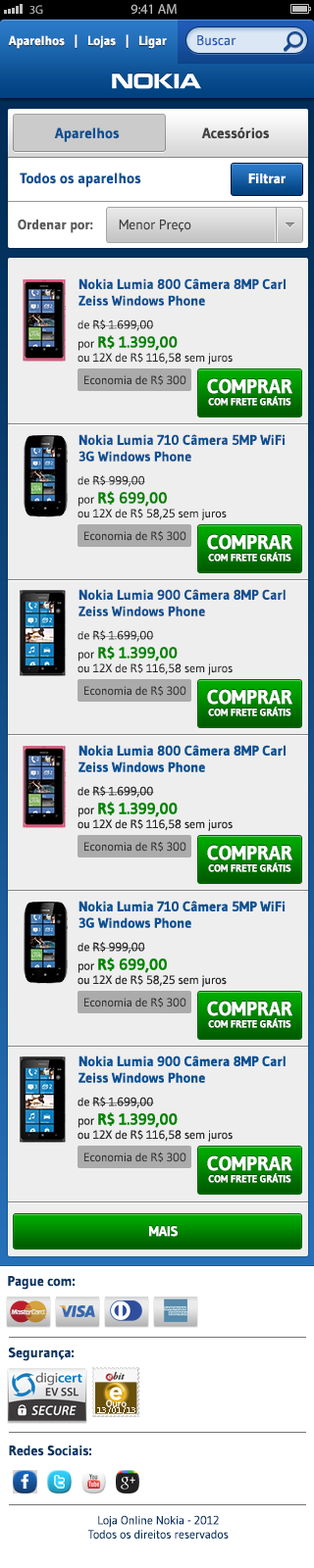
<style>
.page{position:relative;width:314px;height:1568px;background:#eeeeee}
.page>*{position:absolute;margin:0}
.t1{font:12px "MyriadPro-Regular";color:#bfbfbf}
.t2{font:13.8px "MyriadPro-Regular";color:#bfbfbf}
.t3{font:12.7px "Gudea-Bold";color:#ffffff}
.t4{font:13.7px "Gudea";color:#1e58b1}
.t5{font:14.7px "Gudea-Bold";color:#0b4f91}
.t6{font:14.7px "Gudea-Bold";color:#404040}
.t7{font:13.7px "Gudea-Bold";color:#ffffff}
.t8{font:13.7px "Gudea-Bold";color:#5b5b5b}
.t9{font:13.7px "Gudea";color:#404040}
.t10{font:13.7px "Gudea-Bold";color:#0c5093}
.t11{font:11.8px "Gudea";color:#262626}
.t12{font:15.7px "Gudea-Bold";color:#008300}
.t13{font:11.8px "Gudea";color:#373737}
.t14{font:9.9px "Gudea-Bold";color:#ffffff;text-transform:uppercase}
.t15{font:19.8px "Gudea-Bold";color:#ffffff;text-transform:uppercase}
.t16{font:13.7px "Gudea-Bold";color:#ffffff;text-transform:uppercase}
.t17{font:13.7px "Gudea-Bold";color:#063665}
.t18{font:11.8px "Gudea";color:#063665}
</style>
<div class="page">
<p class="t1" style="left:29px;top:5px;width:14px;height:9px">3G</p>
<p class="t2" style="left:130px;top:4px;width:46px;height:10px">9:41 AM</p>
<p class="t3" style="left:8px;top:34px;width:159px;height:15px">Aparelhos   |   Lojas   |   Ligar</p>
<p class="t4" style="left:197px;top:35px;width:39px;height:11px">Buscar</p>
<p class="t5" style="left:54px;top:127px;width:66px;height:15px">Aparelhos</p>
<p class="t6" style="left:201px;top:126px;width:68px;height:13px">Acessórios</p>
<p class="t5" style="left:20px;top:172px;width:121px;height:15px">Todos os aparelhos</p>
<p class="t7" style="left:248px;top:173px;width:37px;height:11px">Filtrar</p>
<p class="t8" style="left:18px;top:220px;width:75px;height:13px">Ordenar por:</p>
<p class="t9" style="left:119px;top:220px;width:72px;height:12px">Menor Preço</p>
<p class="t10" style="left:78px;top:278px;width:207px;height:28px">Nokia Lumia 800 Câmera 8MP Carl Zeiss Windows Phone</p>
<p class="t11" style="left:77px;top:319px;width:155px;height:46px">de R$ 1.699,00<br>por <span class="t12">R$ 1.399,00</span><br>ou 12X de R$ 116,58 sem juros</p>
<p class="t13" style="left:84px;top:375px;width:102px;height:10px">Economia de R$ 300</p>
<p class="t14" style="left:207px;top:378px;width:85px;height:28px;text-align:center"><span class="t15">Comprar<br></span>com frete Grátis</p>
<p class="t10" style="left:78px;top:434px;width:206px;height:28px">Nokia Lumia 710 Câmera 5MP WiFi 3G Windows Phone</p>
<p class="t11" style="left:77px;top:475px;width:149px;height:45px">de R$ 999,00<br>por <span class="t12">R$ 699,00</span><br>ou 12X de R$ 58,25 sem juros</p>
<p class="t13" style="left:84px;top:531px;width:102px;height:10px">Economia de R$ 300</p>
<p class="t14" style="left:207px;top:534px;width:85px;height:28px;text-align:center"><span class="t15">Comprar<br></span>com frete Grátis</p>
<p class="t10" style="left:78px;top:589px;width:207px;height:27px">Nokia Lumia 900 Câmera 8MP Carl Zeiss Windows Phone</p>
<p class="t11" style="left:77px;top:630px;width:155px;height:45px">de R$ 1.699,00<br>por <span class="t12">R$ 1.399,00</span><br>ou 12X de R$ 116,58 sem juros</p>
<p class="t13" style="left:84px;top:686px;width:102px;height:10px">Economia de R$ 300</p>
<p class="t14" style="left:207px;top:689px;width:85px;height:27px;text-align:center"><span class="t15">Comprar<br></span>com frete Grátis</p>
<p class="t16" style="left:149px;top:1226px;width:28px;height:11px">MAIS</p>
<p class="t17" style="left:8px;top:1276px;width:66px;height:14px">Pague com:</p>
<p class="t17" style="left:8px;top:1348px;width:66px;height:13px">Segurança:</p>
<p class="t17" style="left:9px;top:1446px;width:82px;height:10px">Redes Sociais:</p>
<p class="t18" style="left:87px;top:1515px;width:141px;height:24px;text-align:center">Loja Online Nokia - 2012<br>Todos os direitos reservados</p>
</div>
